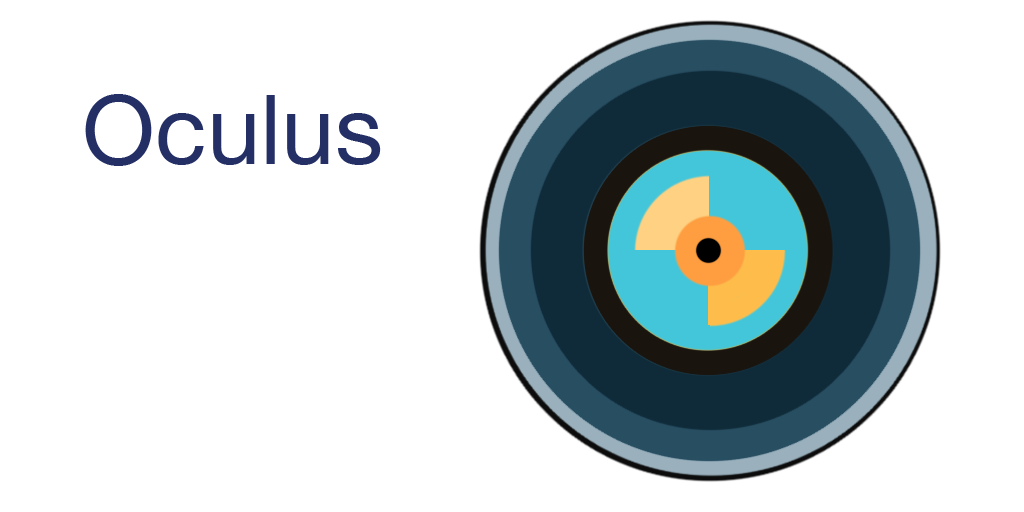
<style>
.page{position:relative;width:1024px;height:512px;background:#ffffff}
.page>*{position:absolute;margin:0}
.t1{font:96px "HelveticaNeue";color:#242f65}
</style>
<div class="page">
<p class="t1" style="left:85px;top:94px;width:296px;height:72px">Oculus</p>
</div>
